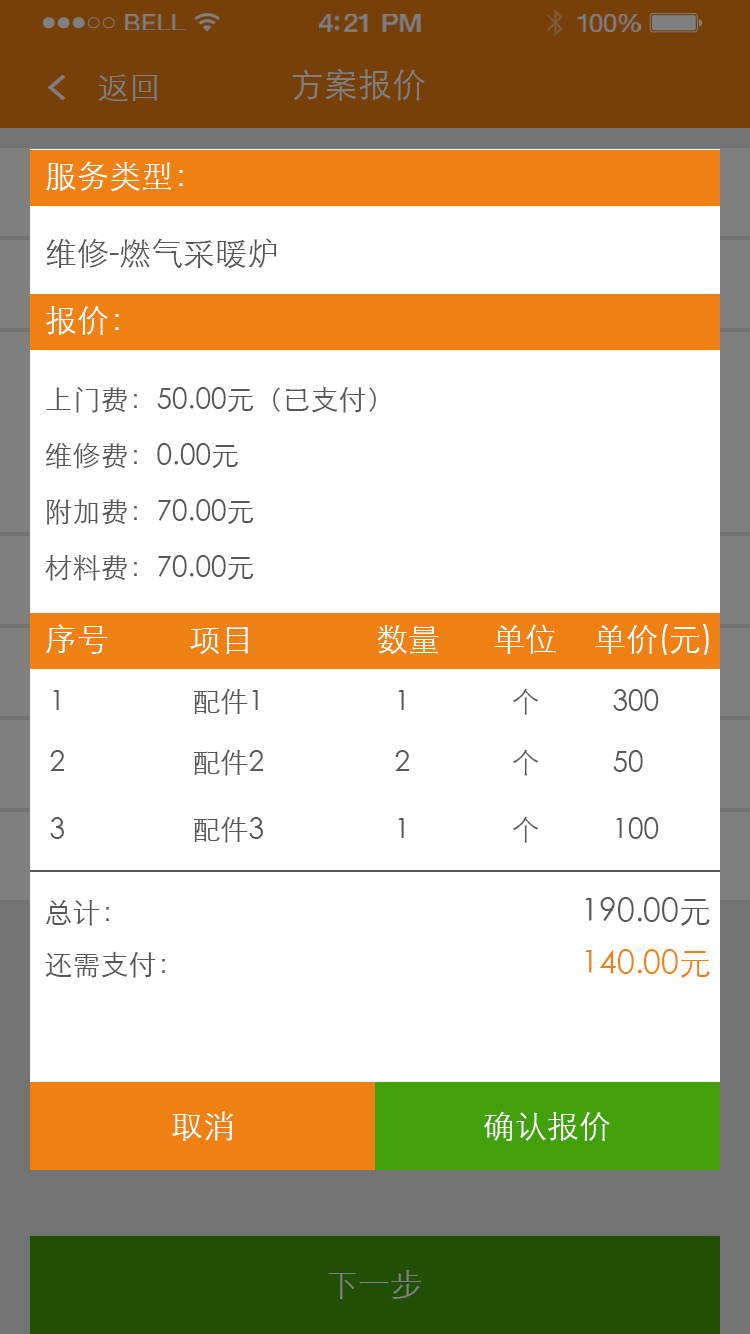
<style>
.page{position:relative;width:750px;height:1334px;background:#ffffff}
.page>*{position:absolute;margin:0}
.t1{font:23.3px "HelveticaNeue";letter-spacing:0.02em;color:#7f7f7f;scale:1.06 1}
.t2{font:25.3px "HelveticaNeue-Medium";letter-spacing:-0.02em;color:#7f7f7f;scale:1.06 1}
.t3{font:24.3px "HelveticaNeue";letter-spacing:-0.02em;color:#7f7f7f;scale:1.06 1}
.t4{font:32px "STXihei";color:#7f7f7f}
.t5{font:34px "STXihei";color:#7f7f7f}
.t6{font:32px "STXihei";color:#ffffff}
.t7{font:32px "STXihei";color:#595757}
.t8{font:28px/56px "STXihei";color:#595757}
.t9{font:28px "STXihei";color:#595757}
.t10{font:32px "STXihei";color:#ef8013}
</style>
<div class="page">
<p class="t1" style="left:125px;top:14px;width:61px;height:16px">BELL</p>
<p class="t2" style="left:319px;top:14px;width:102px;height:18px">4:21 PM</p>
<p class="t3" style="left:577px;top:14px;width:64px;height:18px">100%</p>
<p class="t4" style="left:98px;top:74px;width:59px;height:27px">返回</p>
<p class="t5" style="left:292px;top:69px;width:133px;height:32px">方案报价</p>
<p class="t6" style="left:46px;top:161px;width:137px;height:31px">服务类型：</p>
<p class="t7" style="left:46px;top:238px;width:231px;height:31px">维修-燃气采暖炉</p>
<p class="t6" style="left:46px;top:306px;width:73px;height:29px">报价：</p>
<p class="t8" style="left:45px;top:386px;width:331px;height:195px">上门费：50.00元（已支付）<br>维修费：0.00元<br>附加费：70.00元<br>材料费：70.00元</p>
<p class="t6" style="left:46px;top:624px;width:62px;height:30px">序号</p>
<p class="t6" style="left:190px;top:627px;width:58px;height:27px">项目</p>
<p class="t6" style="left:377px;top:625px;width:62px;height:29px">数量</p>
<p class="t6" style="left:494px;top:624px;width:62px;height:30px">单位</p>
<p class="t6" style="left:595px;top:624px;width:114px;height:31px">单价(元)</p>
<p class="t9" style="left:193px;top:688px;width:65px;height:27px">配件1</p>
<p class="t9" style="left:513px;top:688px;width:26px;height:27px">个</p>
<p class="t9" style="left:613px;top:689px;width:46px;height:22px">300</p>
<p class="t9" style="left:53px;top:690px;width:6px;height:20px">1</p>
<p class="t9" style="left:398px;top:690px;width:6px;height:20px">1</p>
<p class="t9" style="left:50px;top:750px;width:15px;height:21px">2</p>
<p class="t9" style="left:193px;top:749px;width:71px;height:27px">配件2</p>
<p class="t9" style="left:395px;top:750px;width:15px;height:21px">2</p>
<p class="t9" style="left:513px;top:749px;width:26px;height:27px">个</p>
<p class="t9" style="left:613px;top:750px;width:30px;height:22px">50</p>
<p class="t9" style="left:50px;top:817px;width:14px;height:22px">3</p>
<p class="t9" style="left:193px;top:816px;width:70px;height:27px">配件3</p>
<p class="t9" style="left:398px;top:818px;width:6px;height:20px">1</p>
<p class="t9" style="left:513px;top:816px;width:26px;height:27px">个</p>
<p class="t9" style="left:616px;top:817px;width:43px;height:22px">100</p>
<p class="t9" style="left:46px;top:900px;width:63px;height:26px">总计：</p>
<p class="t7" style="left:585px;top:897px;width:125px;height:29px">190.00元</p>
<p class="t9" style="left:45px;top:951px;width:120px;height:27px">还需支付：</p>
<p class="t10" style="left:585px;top:949px;width:125px;height:29px">140.00元</p>
<p class="t6" style="left:172px;top:1111px;width:61px;height:30px">取消</p>
<p class="t6" style="left:483px;top:1111px;width:127px;height:30px">确认报价</p>
<p class="t4" style="left:328px;top:1270px;width:93px;height:29px">下一步</p>
</div>
